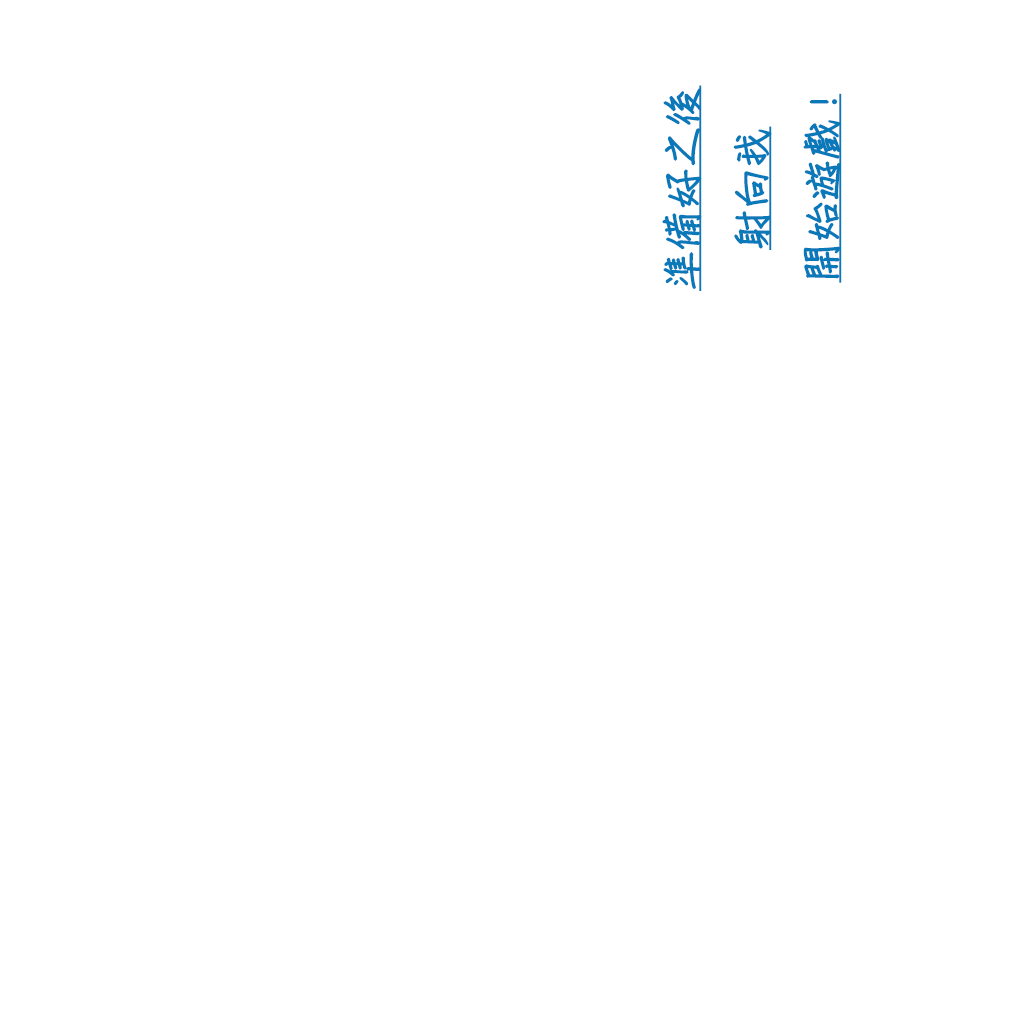
<style>
.page{position:relative;width:1024px;height:1024px;background:#ffffff}
.page>*{position:absolute;margin:0}
.t1{font:40px "DFChu-W4-WINP-BF";color:#0979ba;font-weight:bold;text-decoration:underline}
</style>
<div class="page">
<p class="t1" style="left:662px;top:85px;width:180px;height:206px;text-align:center;rotate:-90deg">準備好之後<br>射向我<br>開始遊戲!</p>
</div>
